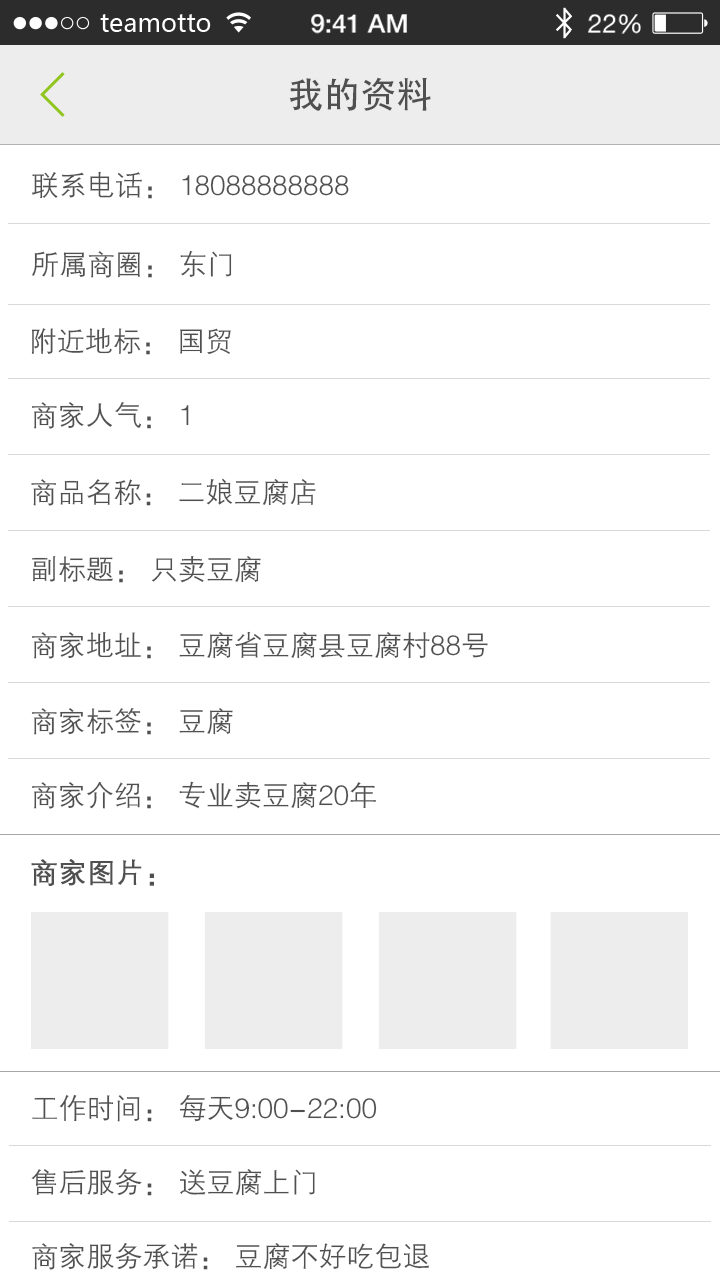
<style>
.page{position:relative;width:720px;height:1280px;background:#ffffff}
.page>*{position:absolute;margin:0}
.t1{font:36px "AdobeHeitiStd-Regular";color:#505050}
.t2{font:28px "FZZDXJW--GB1-0";color:#505050}
.t3{font:28px "FZZDXJW--GB1-0";color:#505050;font-weight:bold}
</style>
<div class="page">
<p class="t1" style="left:289px;top:77px;width:142px;height:34px">我的资料</p>
<p class="t2" style="left:32px;top:171px;width:317px;height:28px">联系电话： 18088888888</p>
<p class="t2" style="left:32px;top:250px;width:200px;height:28px">所属商圈： 东门</p>
<p class="t2" style="left:31px;top:328px;width:200px;height:27px">附近地标： 国贸</p>
<p class="t2" style="left:31px;top:402px;width:158px;height:27px">商家人气： 1</p>
<p class="t2" style="left:31px;top:478px;width:285px;height:28px">商品名称： 二娘豆腐店</p>
<p class="t2" style="left:32px;top:556px;width:229px;height:27px">副标题： 只卖豆腐</p>
<p class="t2" style="left:31px;top:631px;width:457px;height:28px">商家地址： 豆腐省豆腐县豆腐村88号</p>
<p class="t2" style="left:31px;top:708px;width:202px;height:27px">商家标签： 豆腐</p>
<p class="t2" style="left:31px;top:781px;width:345px;height:28px">商家介绍： 专业卖豆腐20年</p>
<p class="t3" style="left:31px;top:859px;width:123px;height:27px">商家图片：</p>
</div>
